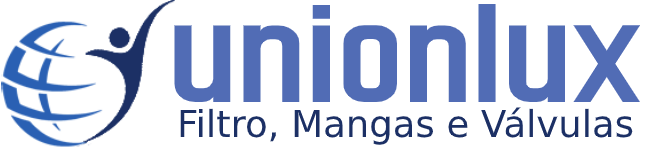
<style>
.page{position:relative;width:650px;height:147px;background:#ffffff}
.page>*{position:absolute;margin:0}
.t1{font:212.6px "Dhurjati";color:#516cb5;scale:0.73 1}
.t2{font:37px "DejaVuSans";color:#1c3065}
</style>
<div class="page">
<p class="t1" style="left:174px;top:4px;width:466px;height:98px">unionlux</p>
<p class="t2" style="left:180px;top:107px;width:453px;height:38px">Filtro, Mangas e Válvulas</p>
</div>
